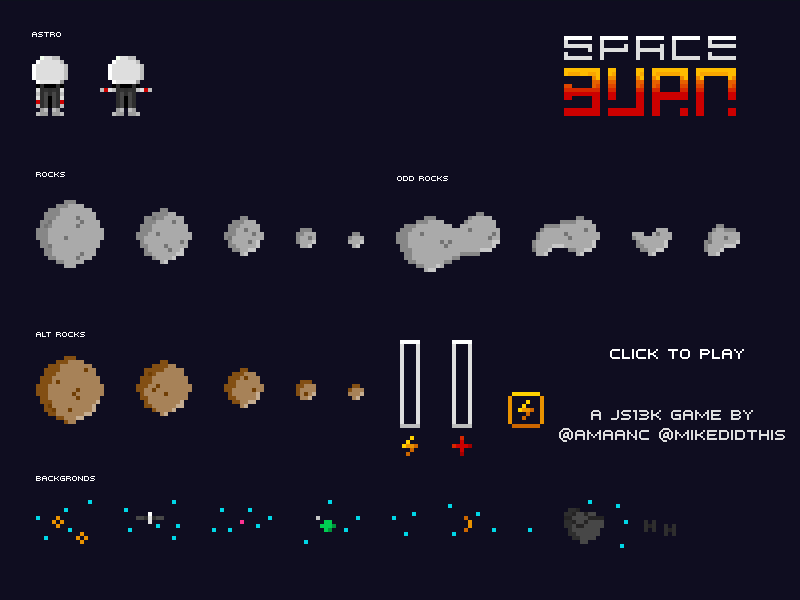
<style>
.page{position:relative;width:800px;height:600px;background:#0f0d20}
.page>*{position:absolute;margin:0}
.t1{font:8px "PFTempestaFive";color:#ffffff}
.t2{font:16px "PFTempestaFive";color:#ffffff}
.t3{font:16px "PFTempestaFive";color:#dedede}
</style>
<div class="page">
<p class="t1" style="left:32px;top:32px;width:29px;height:5px">astro</p>
<p class="t1" style="left:36px;top:172px;width:29px;height:5px">Rocks</p>
<p class="t1" style="left:397px;top:176px;width:51px;height:5px">Odd ROCKS</p>
<p class="t1" style="left:36px;top:332px;width:49px;height:5px">ALT ROCKS</p>
<p class="t2" style="left:610px;top:349px;width:134px;height:10px">Click to play</p>
<p class="t3" style="left:559px;top:410px;width:226px;height:32px;text-align:center">A js13k Game By<br>@Amaanc @Mikedidthis</p>
<p class="t1" style="left:36px;top:476px;width:59px;height:5px">Backgronds</p>
</div>
